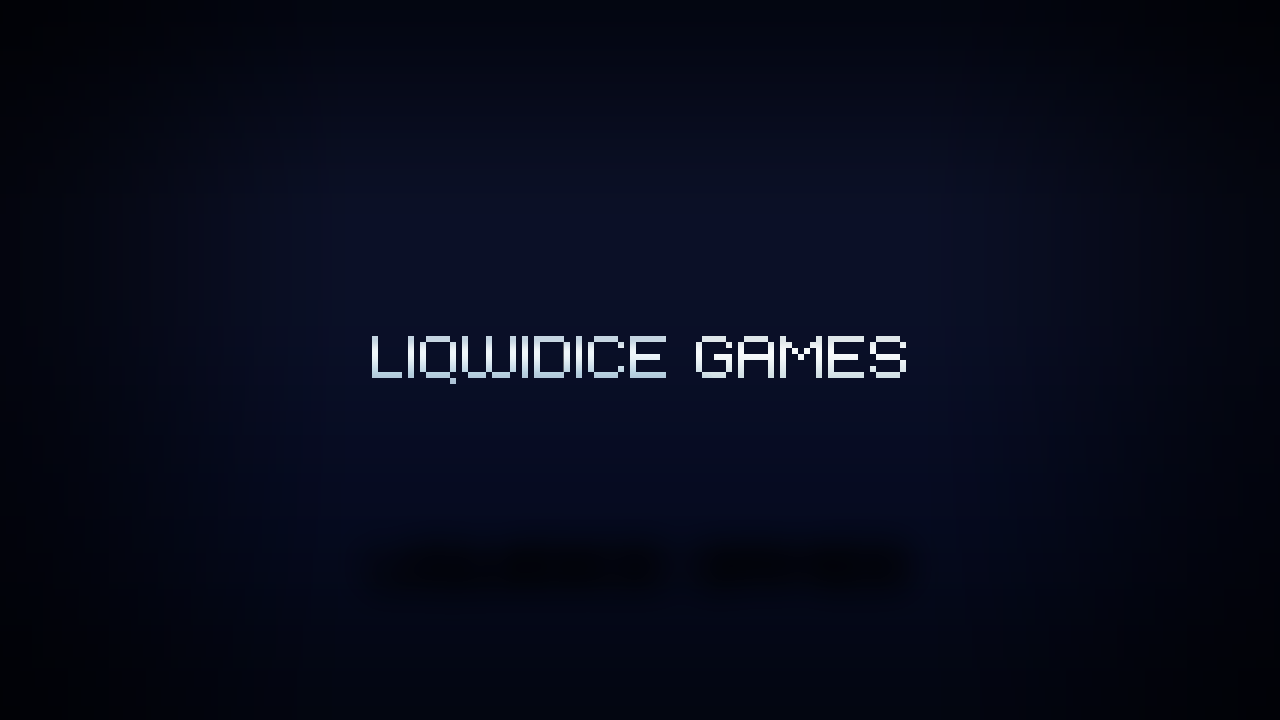
<style>
.page{position:relative;width:1280px;height:720px}
.page>*{position:absolute;margin:0}
.t1{font:48px "PixelFJ8pt1Normal"}
.t2{font:41.4px "PixelFJ8pt1Normal";scale:1.16 1}
</style>
<div class="page">
<p class="t1" style="left:372px;top:336px;width:534px;height:48px">LIQWIDICE GAMES</p>
<p class="t2" style="left:372px;top:344px;width:534px;height:41px">LIQWIDICE GAMES</p>
</div>
